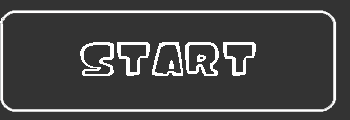
<style>
.page{position:relative;width:350px;height:120px;background:#333333}
.page>*{position:absolute;margin:0}
.t1{font:72px "iceagefont";color:#ffffff}
</style>
<div class="page">
<p class="t1" style="left:80px;top:42px;width:176px;height:34px">Start</p>
</div>
